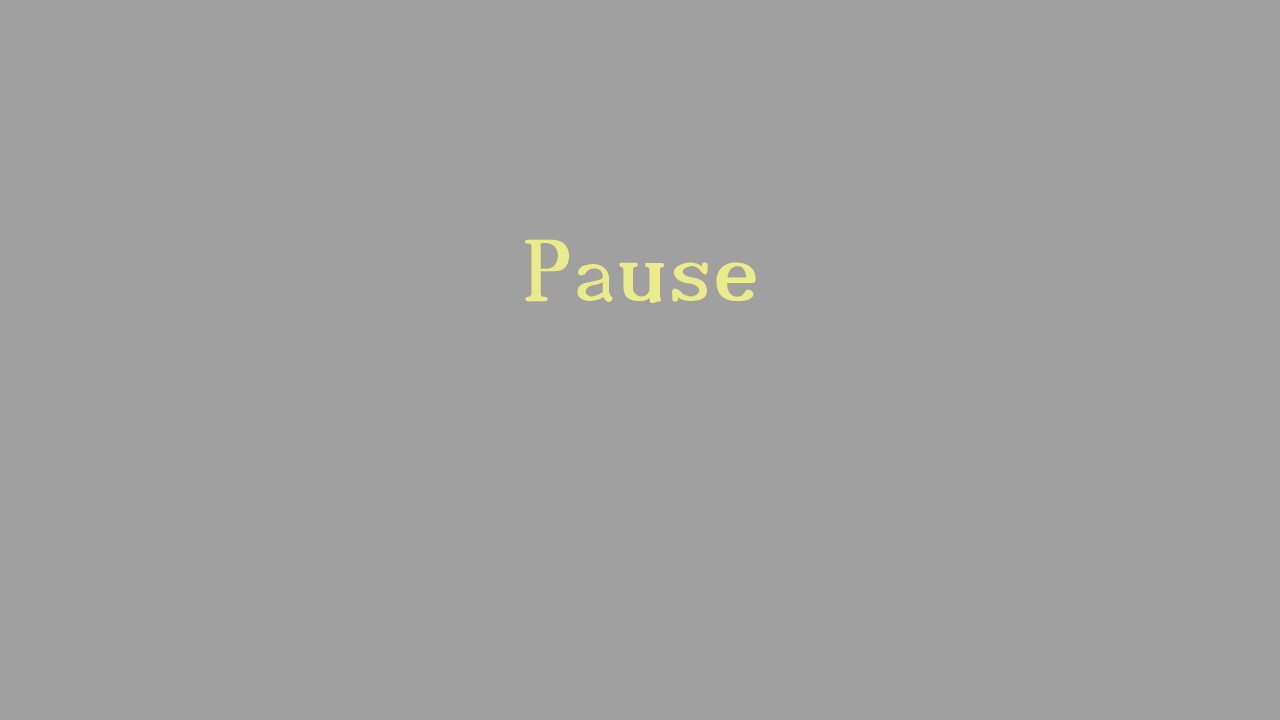
<style>
.page{position:relative;width:1280px;height:720px;background:#a0a0a0}
.page>*{position:absolute;margin:0}
.t1{font:120px "18thCentury";color:#eaeb8b}
</style>
<div class="page">
<p class="t1" style="left:525px;top:239px;width:231px;height:65px">Pause</p>
</div>
